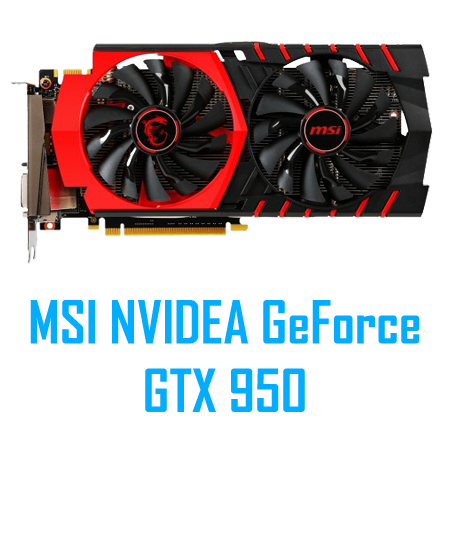
<style>
.page{position:relative;width:450px;height:550px;background:#ffffff}
.page>*{position:absolute;margin:0}
.t1{font:57px "AgencyFB-Bold";color:#02acfe}
</style>
<div class="page">
<p class="t1" style="left:30px;top:300px;width:390px;height:112px;text-align:center">MSI NVIDEA GeForce  <br>GTX 950</p>
</div>
